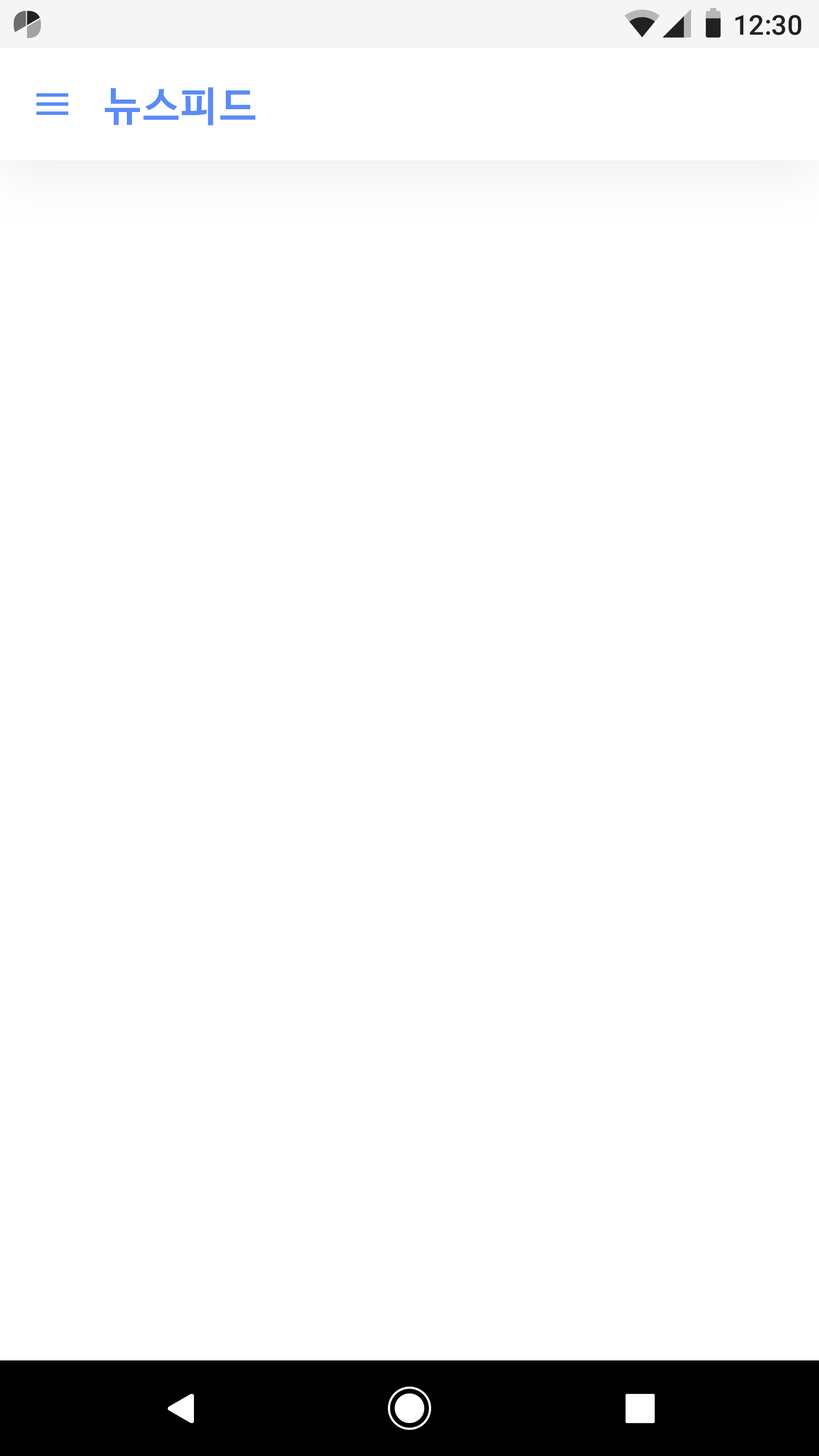
<style>
.page{position:relative;width:819px;height:1456px;background:#ffffff}
.page>*{position:absolute;margin:0}
.t1{font:27.3px "Roboto-Medium";color:#212121}
.t2{font:40.9px "NanumBarunGothicBold";letter-spacing:0.05em;color:#5b8bf4}
</style>
<div class="page">
<p class="t1" style="left:735px;top:15px;width:66px;height:20px">12:30</p>
<p class="t2" style="left:105px;top:87px;width:150px;height:39px">뉴스피드</p>
</div>
